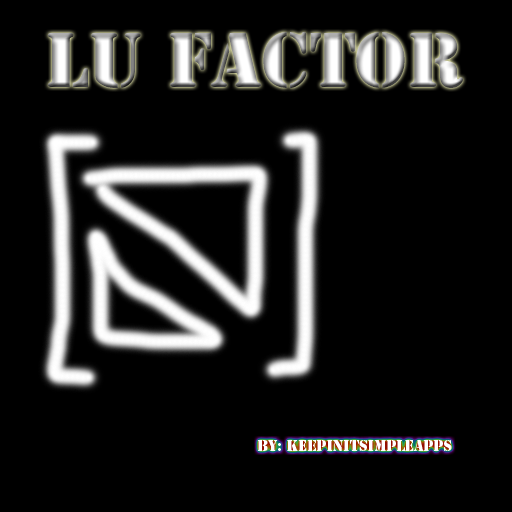
<style>
.page{position:relative;width:512px;height:512px;background:#000000}
.page>*{position:absolute;margin:0}
.t1{font:72px "StencilStd"}
.t2{font:14px "StencilStd";color:#ffffff}
</style>
<div class="page">
<p class="t1" style="left:48px;top:32px;width:416px;height:56px">LU Factor</p>
<p class="t2" style="left:257px;top:440px;width:195px;height:11px">by: KeepinitSimpleApps</p>
</div>
